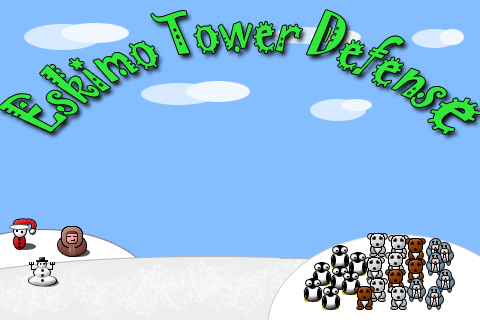
<style>
.page{position:relative;width:480px;height:320px;background:#84beff}
.page>*{position:absolute;margin:0}
.t1{font:36px "Jokerman-Regular";color:#30e93d}
.t2{font:48px "Jokerman-Regular";color:#30e93d}
</style>
<div class="page">
<p class="t1" style="left:0px;top:10px;width:481px;height:124px">Eskimo Tower Defens<span class="t2">e</span></p>
</div>
